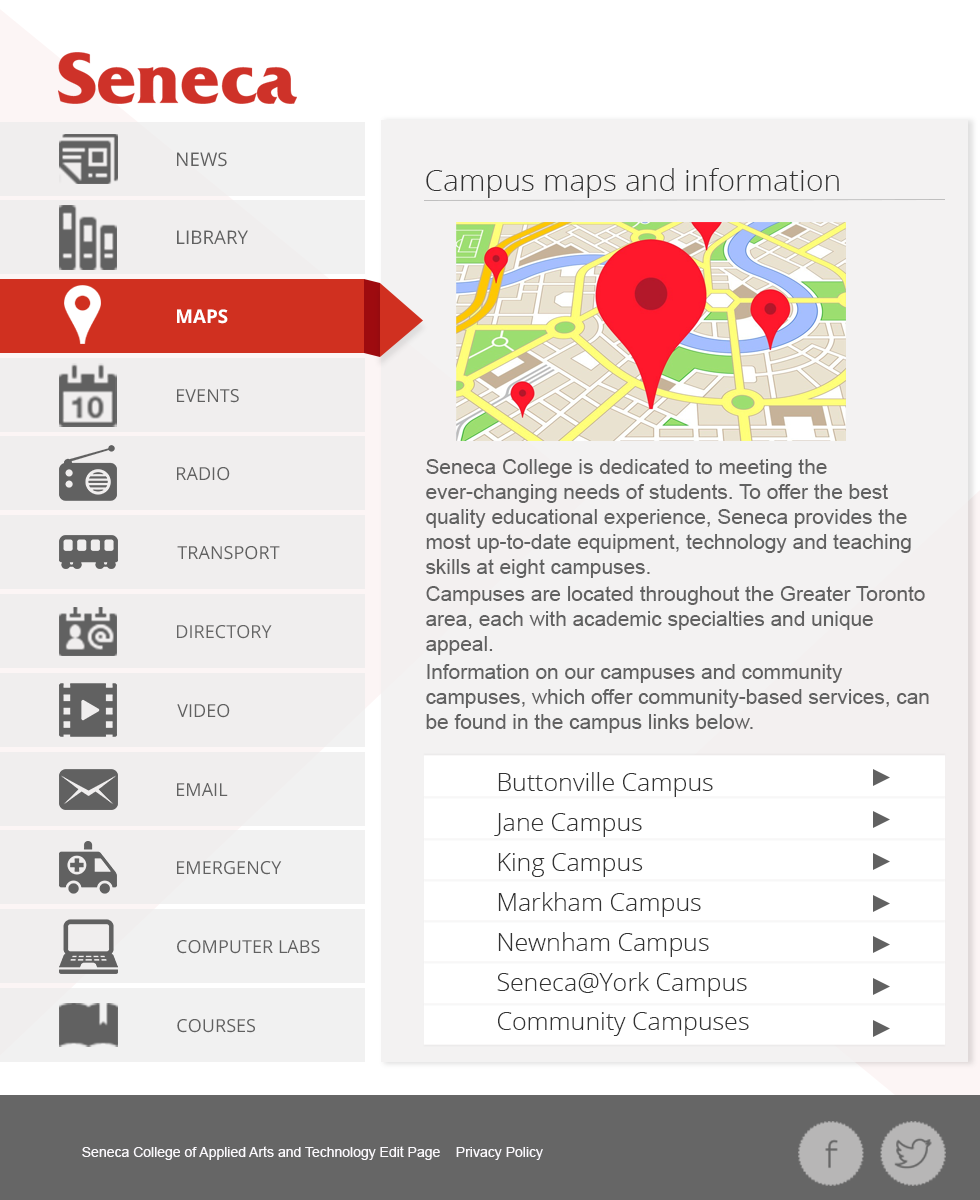
<style>
.page{position:relative;width:980px;height:1200px;background:#ffffff}
.page>*{position:absolute;margin:0}
.t1{font:30px "OpenSans-Light";color:#333333}
.t2{font:20.8px/25px "ArialMT";color:#616161}
.t3{font:25px/37.5px "OpenSans-Light";color:#333333}
</style>
<div class="page">
<p class="t1" style="left:426px;top:168px;width:413px;height:30px">Campus maps and information</p>
<p class="t2" style="left:426px;top:459px;width:503px;height:274px">Seneca College is dedicated to meeting the ever-changing needs of students. To offer the best quality educational experience, Seneca provides the most up-to-date equipment, technology and teaching skills at eight campuses.<br>Campuses are located throughout the Greater Toronto area, each with academic specialties and unique appeal.<br>Information on our campuses and community campuses, which offer community-based services, can be found in the campus links below.</p>
<p class="t3" style="left:494px;top:772px;width:255px;height:264px">Buttonville Campus<br>Jane Campus<br>King Campus<br>Markham Campus<br>Newnham Campus<br>Seneca@York Campus<br>Community Campuses</p>
</div>
